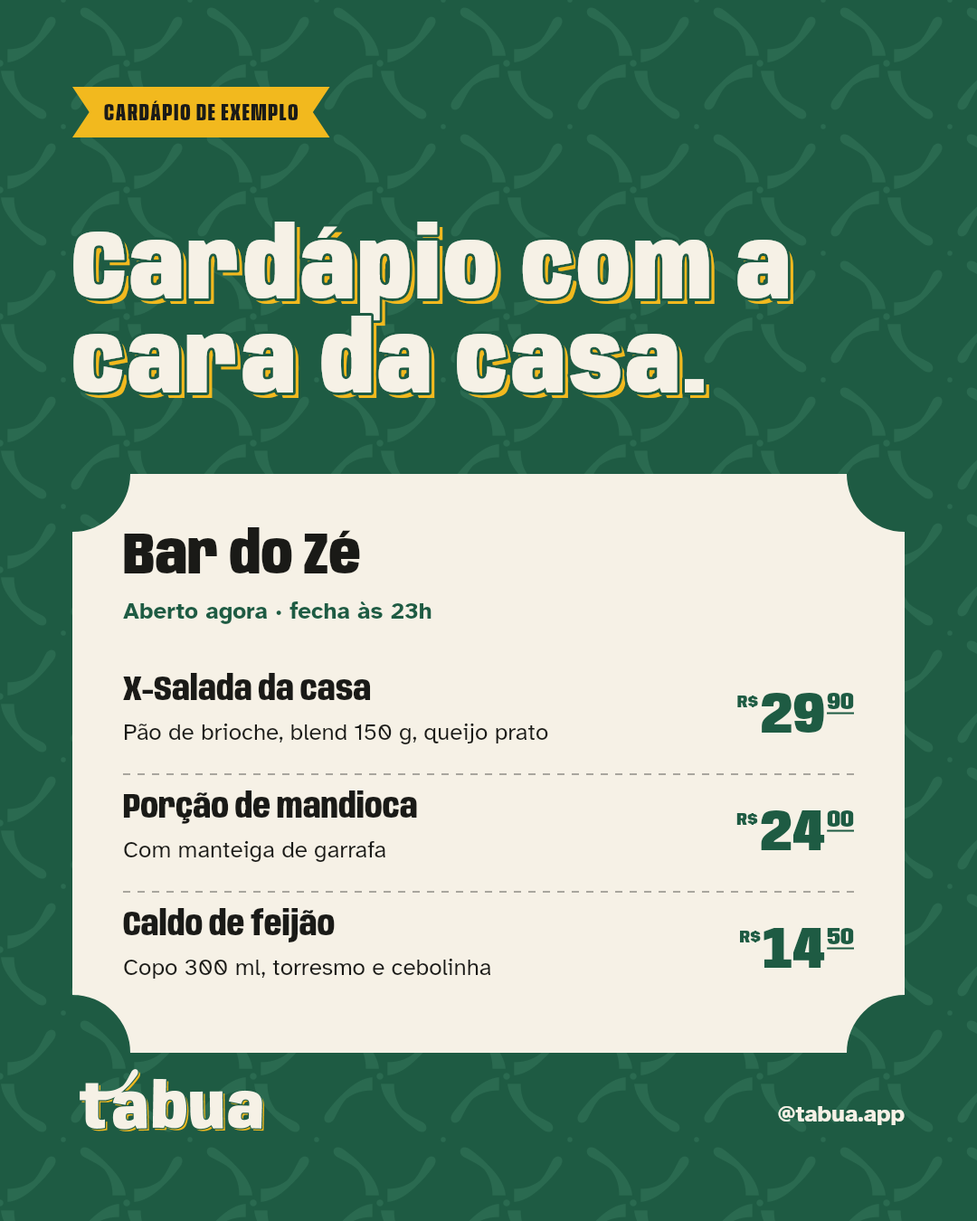
<style>
.page{position:relative;width:977px;height:1221px;background:#1e5b43}
.page>*{position:absolute;margin:0}
.t1{font:24.4px "Anybody-ExtraBold-W60";letter-spacing:0.06em;color:#1a1a17}
.t2{font:97.7px/94.1px "Anybody-Black-W75";letter-spacing:0.034em;color:#f6f1e6}
.t3{font:97.7px/94.1px "Anybody-Black-W75";letter-spacing:0.034em}
.t4{font:57.9px "Anybody-Black-W75";color:#1a1a17}
.t5{font:23.5px "AtkinsonHyperlegible-Bold";color:#1e5b43}
.t6{font:34.4px "Anybody-ExtraBold-W75";color:#1a1a17}
.t7{font:18.1px "Anybody-Black-W80";color:#1e5b43}
.t8{font:57.9px "Anybody-Black-W80";color:#1e5b43}
.t9{font:24.4px "Anybody-Black-W80";color:#1e5b43;text-decoration:underline}
.t10{font:23.5px "AtkinsonHyperlegible-Regular";color:#1a1a17}
.t11{font:23.5px "AtkinsonHyperlegible-Bold";color:#f6f1e6}
</style>
<div class="page">
<p class="t1" style="left:104px;top:100px;width:194px;height:20px">CARDÁPIO DE EXEMPLO</p>
<p class="t2" style="left:71px;top:219px;width:719px;height:176px">Cardápio com a<br>cara da casa.</p>
<p class="t3" style="left:79px;top:227px;width:714px;height:171px">Cardápio com a<br>cara da casa.</p>
<p class="t4" style="left:124px;top:527px;width:236px;height:46px">Bar do Zé</p>
<p class="t5" style="left:123px;top:601px;width:308px;height:23px">Aberto agora · fecha às 23h</p>
<p class="t6" style="left:123px;top:673px;width:248px;height:27px">X-Salada da casa</p>
<p class="t7" style="left:737px;top:695px;width:21px;height:12px">R$</p>
<p class="t8" style="left:761px;top:693px;width:63px;height:40px">29</p>
<p class="t9" style="left:827px;top:693px;width:27px;height:21px">90</p>
<p class="t10" style="left:124px;top:723px;width:424px;height:21px">Pão de brioche, blend 150 g, queijo prato</p>
<p class="t6" style="left:123px;top:790px;width:294px;height:34px">Porção de mandioca</p>
<p class="t7" style="left:736px;top:813px;width:22px;height:12px">R$</p>
<p class="t8" style="left:761px;top:810px;width:64px;height:40px">24</p>
<p class="t9" style="left:827px;top:810px;width:27px;height:22px">00</p>
<p class="t10" style="left:124px;top:840px;width:261px;height:22px">Com manteiga de garrafa</p>
<p class="t6" style="left:123px;top:908px;width:212px;height:34px">Caldo de feijão</p>
<p class="t8" style="left:763px;top:928px;width:62px;height:40px">14</p>
<p class="t9" style="left:827px;top:928px;width:27px;height:22px">50</p>
<p class="t7" style="left:740px;top:931px;width:21px;height:11px">R$</p>
<p class="t10" style="left:124px;top:958px;width:367px;height:21px">Copo 300 ml, torresmo e cebolinha</p>
<p class="t11" style="left:778px;top:1106px;width:126px;height:19px">@tabua.app</p>
</div>
